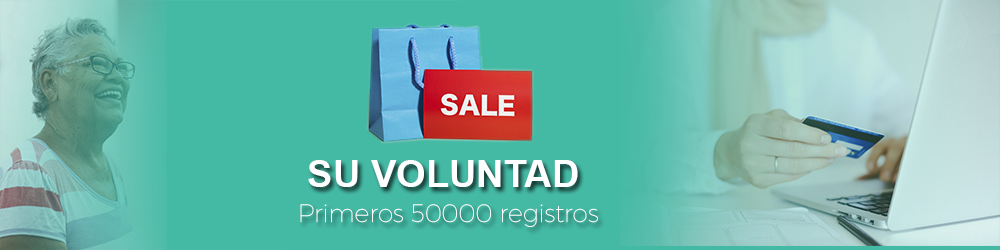
<style>
.page{position:relative;width:1000px;height:250px;background:#44baa5}
.page>*{position:absolute;margin:0}
.t1{font:38px "Arial-BoldMT";color:#ffffff}
.t2{font:25px "Montserrat-Hairline";color:#ffffff}
</style>
<div class="page">
<p class="t1" style="left:308px;top:160px;width:270px;height:27px">SU VOLUNTAD</p>
<p class="t2" style="left:300px;top:204px;width:298px;height:23px">Primeros 50000 registros</p>
</div>
